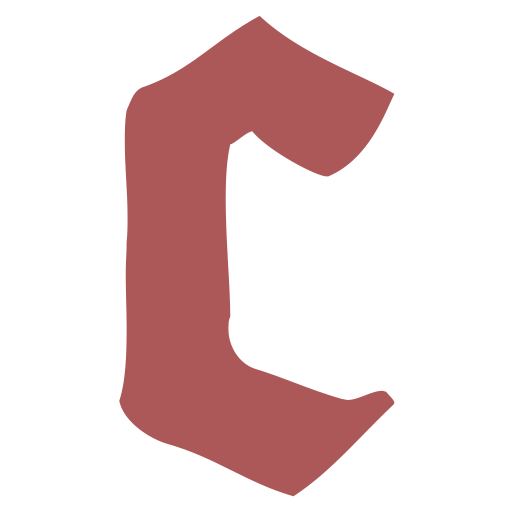
<style>
.page{position:relative;width:512px;height:512px;background:#ffffff}
.page>*{position:absolute;margin:0}
.t1{font:916.7px "GothicusRoman";color:#ac5858}
</style>
<div class="page">
<p class="t1" style="left:119px;top:15px;width:276px;height:482px">c</p>
</div>
